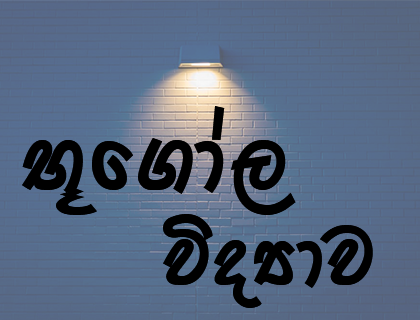
<style>
.page{position:relative;width:420px;height:320px}
.page>*{position:absolute;margin:0}
.t1{font:84.6px "0KDBOLIDDAbold";letter-spacing:0.05em;color:#000000}
.t2{font:75px "0KDBOLIDDAbold";letter-spacing:0.05em;color:#000000}
</style>
<div class="page">
<p class="t1" style="left:22px;top:106px;width:274px;height:109px">N+f.da,</p>
<p class="t2" style="left:163px;top:214px;width:210px;height:94px">úoHdj</p>
</div>
